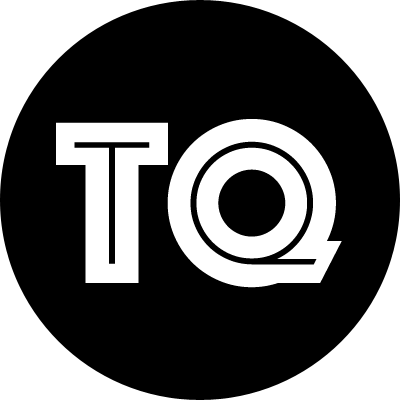
<style>
.page{position:relative;width:400px;height:400px;background:#000000}
.page>*{position:absolute;margin:0}
.t1{font:240.4px "Phosphate-Inline";color:#ffffff}
</style>
<div class="page">
<p class="t1" style="left:56px;top:119px;width:286px;height:169px">TQ</p>
</div>
